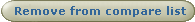
<style>
.page{position:relative;width:195px;height:22px}
.page>*{position:absolute;margin:0}
.t1{font:11px "Verdana-Bold";color:#336699}
</style>
<div class="page">
<p class="t1" style="left:15px;top:6px;width:171px;height:11px">Remove from compare list</p>
</div>
